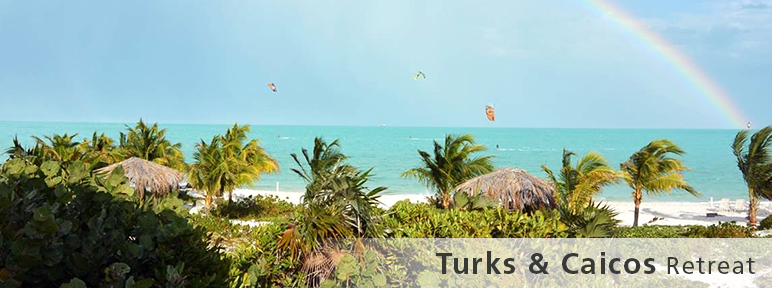
<style>
.page{position:relative;width:772px;height:288px}
.page>*{position:absolute;margin:0}
.t1{font:30px "FrutigerLTStd-Bold";letter-spacing:0.05em;color:#373936}
.t2{font:24px "FrutigerLTStd-Roman";letter-spacing:0.05em;color:#373936}
</style>
<div class="page">
<p class="t1" style="left:436px;top:251px;width:319px;height:23px">Turks &amp; Caicos<span class="t2"> Retreat</span></p>
</div>
